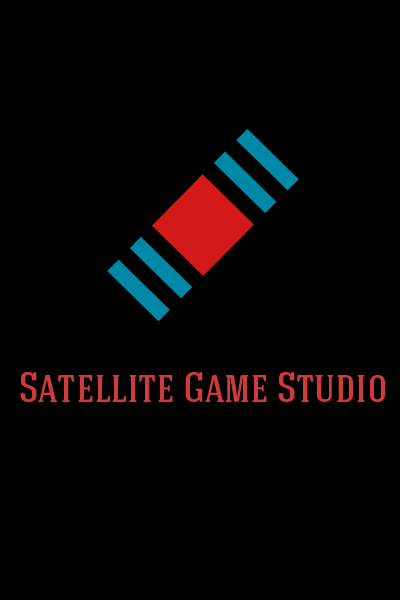
<style>
.page{position:relative;width:400px;height:600px;background:#000000}
.page>*{position:absolute;margin:0}
.t1{font:42px "HaginCapsMedium";color:#d03a3a}
</style>
<div class="page">
<p class="t1" style="left:20px;top:372px;width:365px;height:30px">Satellite Game Studio</p>
</div>
